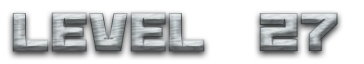
<style>
.page{position:relative;width:364px;height:64px;background:#ffffff}
.page>*{position:absolute;margin:0}
.t1{font:60px "BananaBrick"}
</style>
<div class="page">
<p class="t1" style="left:12px;top:12px;width:326px;height:40px">Level  27</p>
</div>
